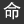
<style>
.page{position:relative;width:24px;height:24px;background:#333333}
.page>*{position:absolute;margin:0}
.t1{font:18px "AdobeHeitiStd-Regular";color:#ffffff}
</style>
<div class="page">
<p class="t1" style="left:3px;top:2px;width:18px;height:18px">命</p>
</div>
